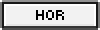
<style>
.page{position:relative;width:100px;height:30px;background:#f2f2f2}
.page>*{position:absolute;margin:0}
.t1{font:10px "Pixel";letter-spacing:0.005em;color:#000000}
</style>
<div class="page">
<p class="t1" style="left:36px;top:10px;width:28px;height:10px">hor</p>
</div>
